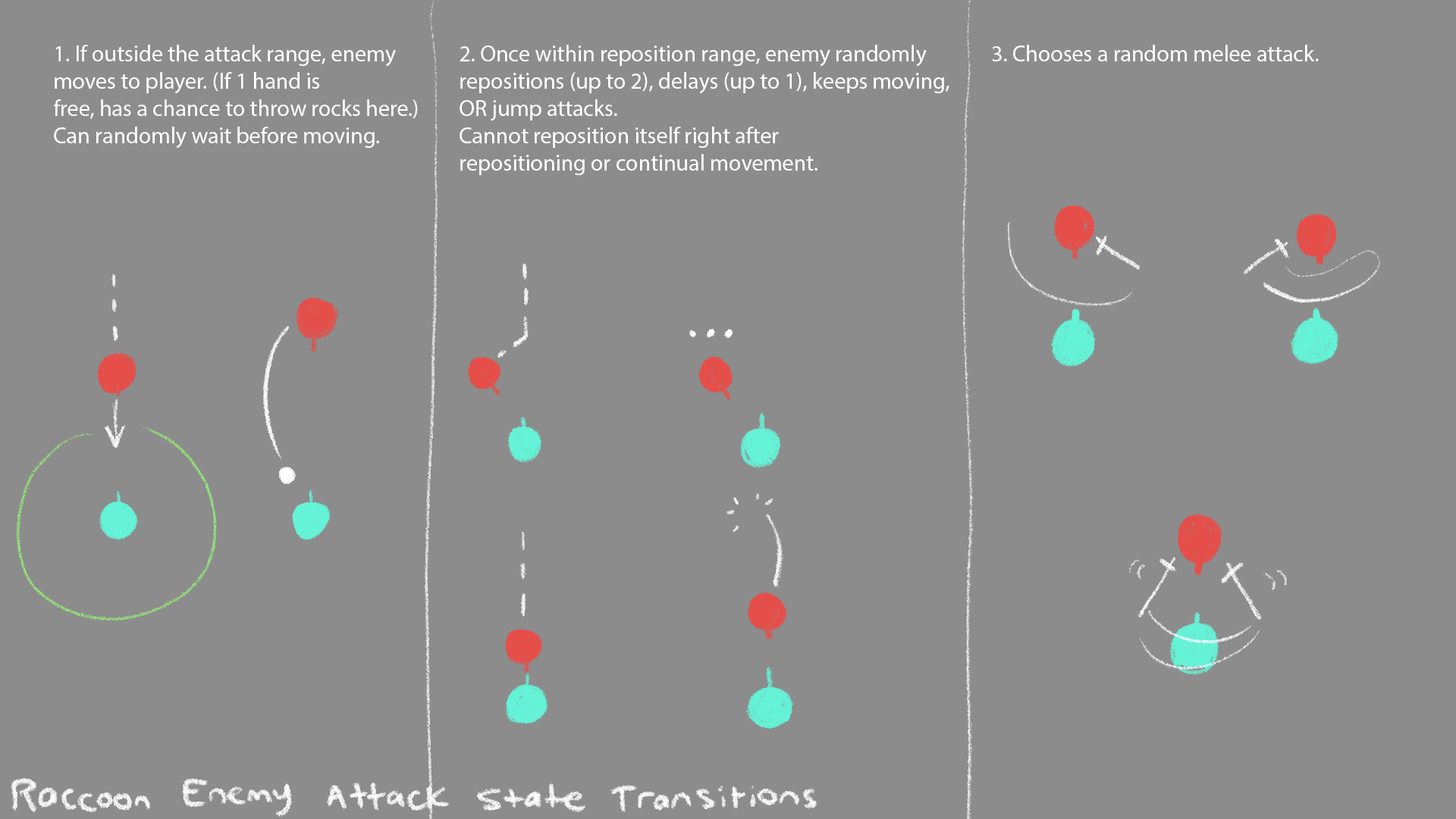
<style>
.page{position:relative;width:1456px;height:819px;background:#8c8c8c}
.page>*{position:absolute;margin:0}
.t1{font:22.7px "MyriadPro-Regular";color:#ffffff}
</style>
<div class="page">
<p class="t1" style="left:54px;top:45px;width:364px;height:104px">1. If outside the attack range, enemy <br>moves to player. (If 1 hand is<br>free, has a chance to throw rocks here.)<br>Can randomly wait before moving.</p>
<p class="t1" style="left:460px;top:45px;width:489px;height:130px">2. Once within reposition range, enemy randomly <br>repositions (up to 2), delays (up to 1), keeps moving,<br>OR jump attacks.<br>Cannot reposition itself right after <br>repositioning or continual movement.</p>
<p class="t1" style="left:992px;top:45px;width:327px;height:16px">3. Chooses a random melee attack.</p>
</div>
